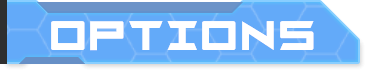
<style>
.page{position:relative;width:365px;height:70px;background:#63aaf9}
.page>*{position:absolute;margin:0}
.t1{font:45.3px "QORE";color:#ffffff}
</style>
<div class="page">
<p class="t1" style="left:51px;top:21px;width:263px;height:30px">OPTIONS</p>
</div>
